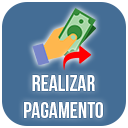
<style>
.page{position:relative;width:128px;height:128px;background:#446d95}
.page>*{position:absolute;margin:0}
.t1{font:22px "BebasNeue";color:#ffffff}
</style>
<div class="page">
<p class="t1" style="left:24px;top:75px;width:79px;height:43px;text-align:center">REALIZAR PAGAMENTO</p>
</div>
